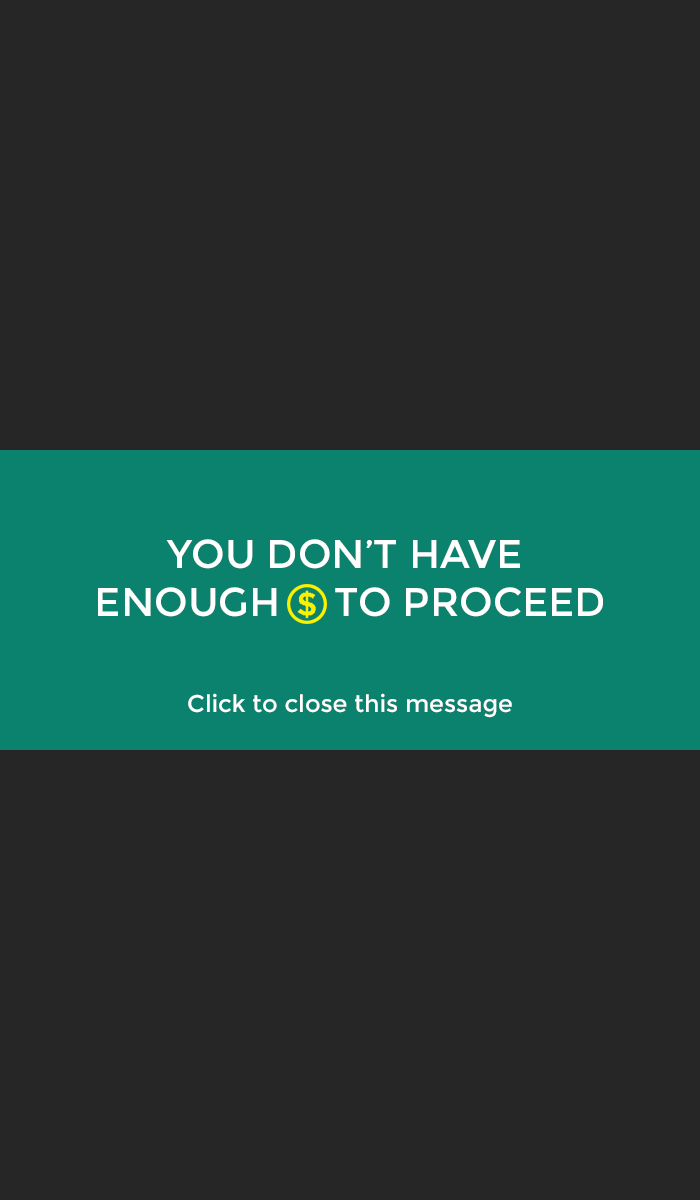
<style>
.page{position:relative;width:700px;height:1200px;background:#262626}
.page>*{position:absolute;margin:0}
.t1{font:40px "Montserrat-Regular";color:#ffffff}
.t2{font:24px "Montserrat-Regular";color:#ffffff}
</style>
<div class="page">
<p class="t1" style="left:98px;top:539px;width:505px;height:78px;text-align:center">YOU DON’T HAVE <br>ENOUGH     TO PROCEED</p>
<p class="t2" style="left:188px;top:693px;width:324px;height:25px">Click to close this message</p>
</div>
